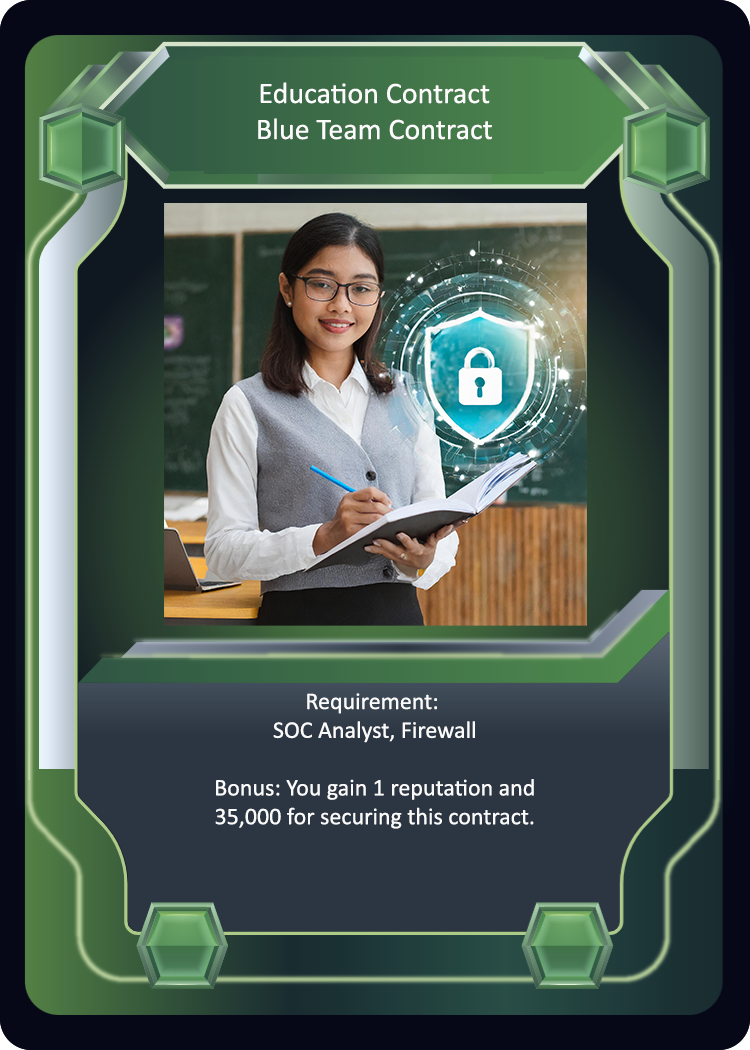
<style>
.page{position:relative;width:750px;height:1050px}
.page>*{position:absolute;margin:0}
.t1{font:30px "Calibri";color:#fcfbfb}
.t2{font:24px "Calibri";color:#fcfbfb}
</style>
<div class="page">
<p class="t1" style="left:258px;top:82px;width:234px;height:58px;text-align:center">Education Contract<br>Blue Team Contract</p>
<p class="t2" style="left:215px;top:693px;width:319px;height:136px;text-align:center">Requirement: <br>SOC Analyst, Firewall<br><br>Bonus: You gain 1 reputation and<br>35,000 for securing this contract.</p>
</div>
